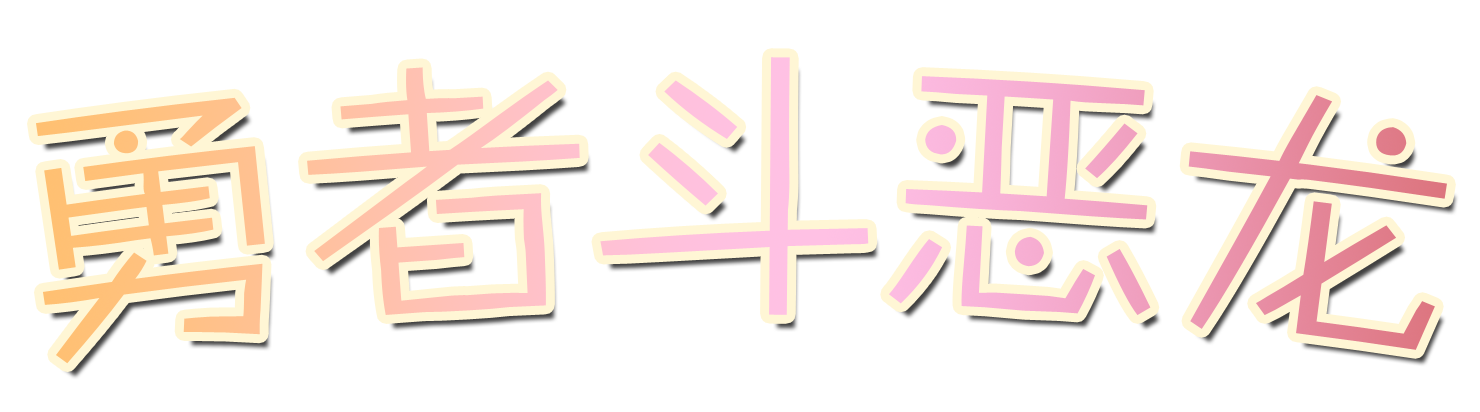
<style>
.page{position:relative;width:1480px;height:412px;background:#ffffff}
.page>*{position:absolute;margin:0}
.t1{font:279.2px "FZZHYJW--GB1-0"}
</style>
<div class="page">
<p class="t1" style="left:35px;top:57px;width:1412px;height:307px">勇者斗恶龙</p>
</div>
